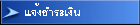
<style>
.page{position:relative;width:140px;height:25px}
.page>*{position:absolute;margin:0}
.t1{font:15.3px "EucrosiaDSE";color:#ffffff;scale:1.12 1}
</style>
<div class="page">
<p class="t1" style="left:25px;top:3px;width:55px;height:13px">á¨é§ªÓÃÐà§Ô¹</p>
</div>
